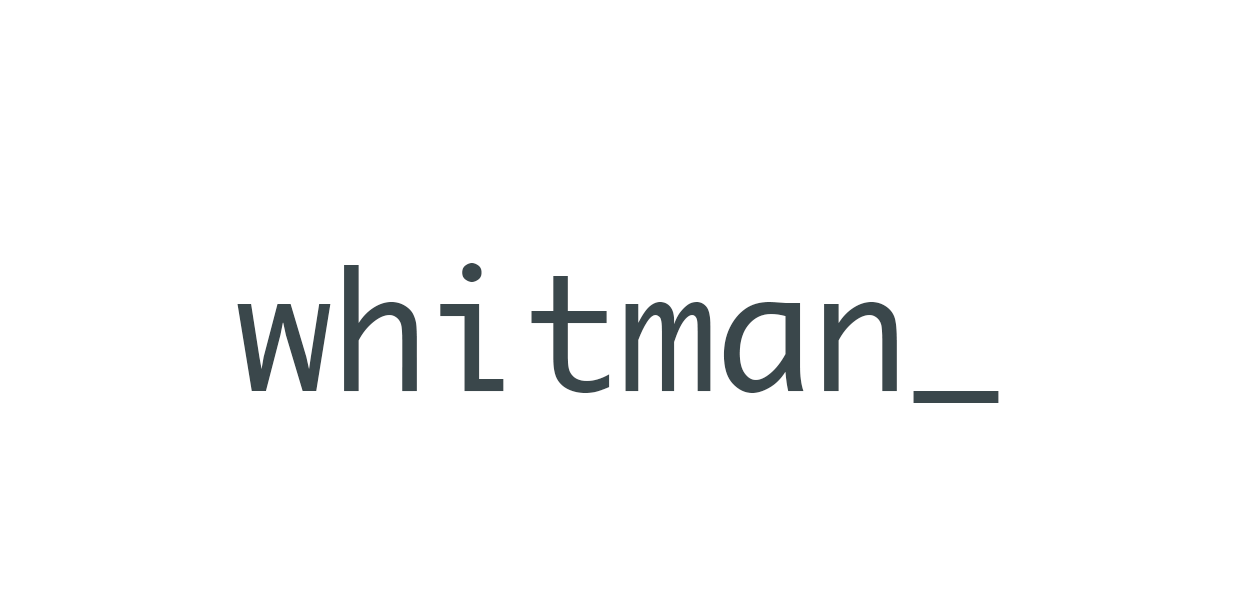
<style>
.page{position:relative;width:1240px;height:600px;background:#ffffff}
.page>*{position:absolute;margin:0}
.t1{font:160px "Monaco";color:#3a474b}
</style>
<div class="page">
<p class="t1" style="left:237px;top:263px;width:762px;height:140px">whitman_</p>
</div>
